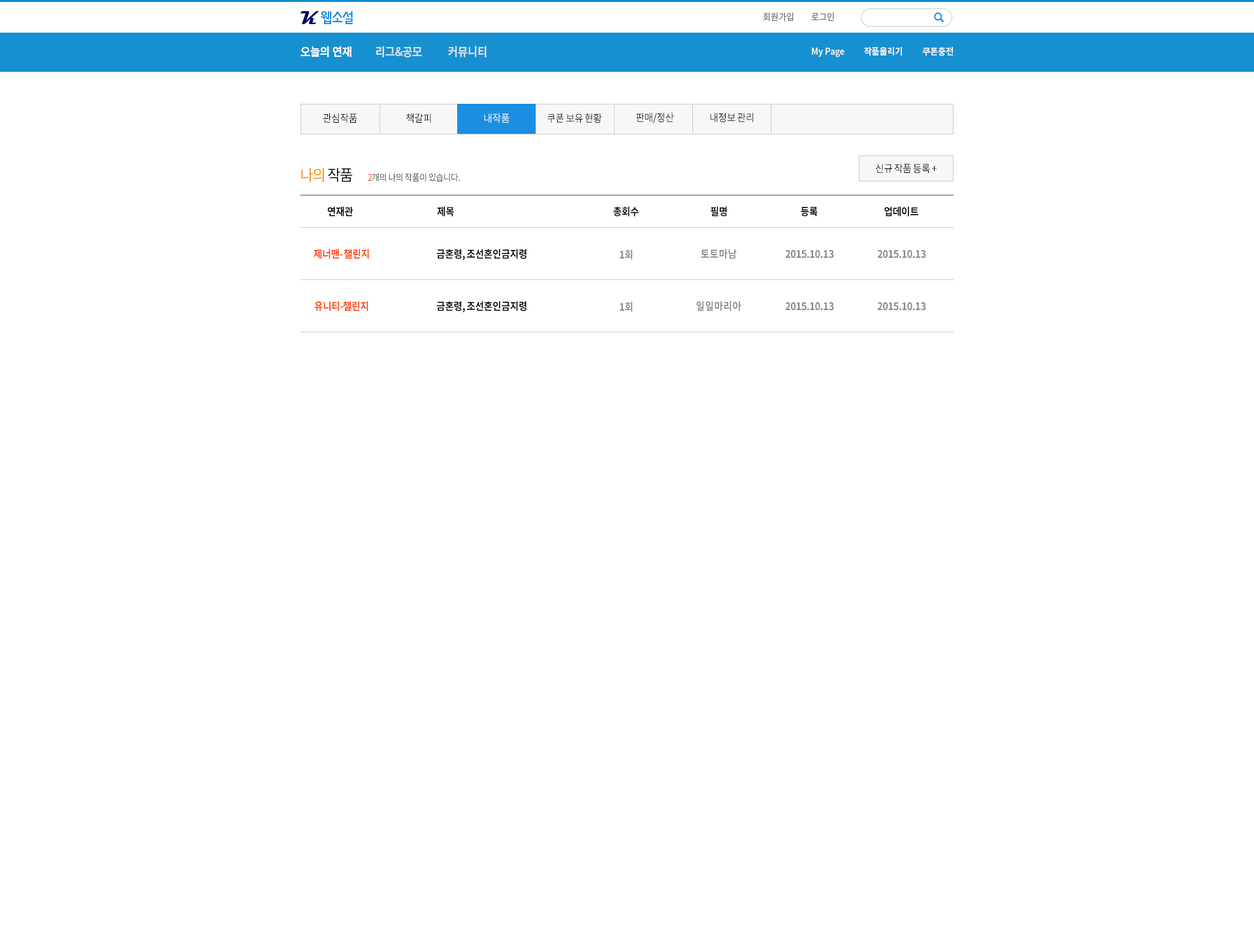
<style>
.page{position:relative;width:1254px;height:951px;background:#ffffff}
.page>*{position:absolute;margin:0}
.t1{font:9.1px "NotoSansCJKkr-Regular";letter-spacing:-0.002em;color:#727272;scale:0.92 1}
.t2{font:11.8px "NotoSansCJKkr-Bold";letter-spacing:-0.002em;color:#dddddd;scale:0.92 1}
.t3{font:11.8px "NotoSansCJKkr-Bold";letter-spacing:-0.002em;color:#ffffff;scale:0.92 1}
.t4{font:9.1px "NotoSansCJKkr-Bold";letter-spacing:-0.002em;color:#ececec;scale:0.92 1}
.t5{font:10.4px "NotoSansCJKkr-Regular";letter-spacing:-0.05em;color:#000000;scale:0.92 1}
.t6{font:10.4px "NotoSansCJKkr-Regular";letter-spacing:-0.05em;color:#ffffff;scale:0.92 1}
.t7{font:15.7px "NotoSansCJKkr-Regular";letter-spacing:-0.05em;color:#ff8400;scale:0.92 1}
.t8{font:15.7px "NotoSansCJKkr-Regular";letter-spacing:-0.05em;color:#000000;scale:0.92 1}
.t9{font:9.1px "NotoSansCJKkr-Regular";letter-spacing:-0.05em;color:#474747;scale:0.92 1}
.t10{font:9.1px "NotoSansCJKkr-Regular";letter-spacing:-0.05em;color:#ff3000;scale:0.92 1}
.t11{font:10.4px "NotoSansCJKkr-Bold";letter-spacing:-0.05em;color:#000000;scale:0.92 1}
.t12{font:10.4px "NotoSansCJKkr-Bold";letter-spacing:-0.05em;color:#ff3c00;scale:0.92 1}
.t13{font:10.4px "NotoSansCJKkr-Bold";letter-spacing:-0.05em;color:#888888;scale:0.92 1}
.t14{font:10.4px "NotoSansCJKkr-Bold";color:#888888;scale:0.92 1}
</style>
<div class="page">
<p class="t1" style="left:763px;top:12px;width:30px;height:10px">회원가입</p>
<p class="t1" style="left:811px;top:12px;width:23px;height:9px">로그인</p>
<p class="t2" style="left:300px;top:46px;width:186px;height:11px"><span class="t3">오늘의 연재         </span>리그&amp;공모          커뮤니티</p>
<p class="t4" style="left:812px;top:46px;width:141px;height:11px">My Page          작품올리기          쿠폰충전</p>
<p class="t5" style="left:323px;top:113px;width:34px;height:10px">관심작품</p>
<p class="t5" style="left:406px;top:113px;width:25px;height:10px">책갈피</p>
<p class="t6" style="left:484px;top:113px;width:25px;height:10px">내작품</p>
<p class="t5" style="left:547px;top:113px;width:55px;height:10px">쿠폰 보유 현황</p>
<p class="t5" style="left:636px;top:112px;width:38px;height:11px">판매/정산</p>
<p class="t5" style="left:710px;top:113px;width:43px;height:10px">내정보 관리</p>
<p class="t7" style="left:301px;top:168px;width:52px;height:14px">나의<span class="t8"> 작품</span></p>
<p class="t9" style="left:368px;top:173px;width:92px;height:9px"><span class="t10">2</span>개의 나의 작품이 있습니다.</p>
<p class="t5" style="left:876px;top:163px;width:60px;height:11px">신규 작품 등록 +</p>
<p class="t11" style="left:327px;top:206px;width:26px;height:11px">연재관</p>
<p class="t11" style="left:437px;top:206px;width:17px;height:11px">제목</p>
<p class="t11" style="left:613px;top:206px;width:26px;height:11px">총회수</p>
<p class="t11" style="left:710px;top:206px;width:17px;height:11px">필명</p>
<p class="t11" style="left:800px;top:207px;width:17px;height:10px">등록</p>
<p class="t11" style="left:884px;top:206px;width:34px;height:11px">업데이트</p>
<p class="t12" style="left:313px;top:249px;width:56px;height:10px">제너맨- 챌린지</p>
<p class="t11" style="left:436px;top:249px;width:90px;height:12px">금혼령, 조선혼인금지령</p>
<p class="t13" style="left:620px;top:249px;width:12px;height:11px">1회</p>
<p class="t14" style="left:701px;top:249px;width:35px;height:10px">토토마남</p>
<p class="t13" style="left:785px;top:250px;width:49px;height:9px">2015.10.13</p>
<p class="t13" style="left:877px;top:250px;width:49px;height:9px">2015.10.13</p>
<p class="t12" style="left:314px;top:301px;width:54px;height:10px">유니티-챌린지</p>
<p class="t11" style="left:436px;top:301px;width:90px;height:12px">금혼령, 조선혼인금지령</p>
<p class="t13" style="left:620px;top:302px;width:12px;height:10px">1회</p>
<p class="t14" style="left:696px;top:301px;width:45px;height:10px">일일마리아</p>
<p class="t13" style="left:785px;top:302px;width:49px;height:9px">2015.10.13</p>
<p class="t13" style="left:877px;top:302px;width:49px;height:9px">2015.10.13</p>
</div>
